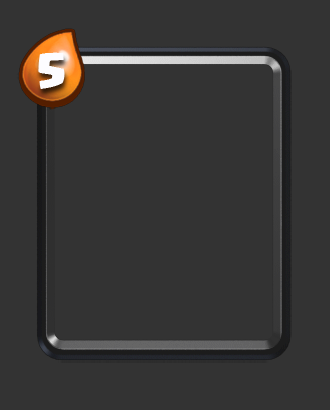
<style>
.page{position:relative;width:330px;height:410px;background:#333333}
.page>*{position:absolute;margin:0}
.t1{font:48.6px "Supercell-Magic";color:#fdfcff}
</style>
<div class="page">
<p class="t1" style="left:38px;top:52px;width:27px;height:37px">5</p>
</div>
